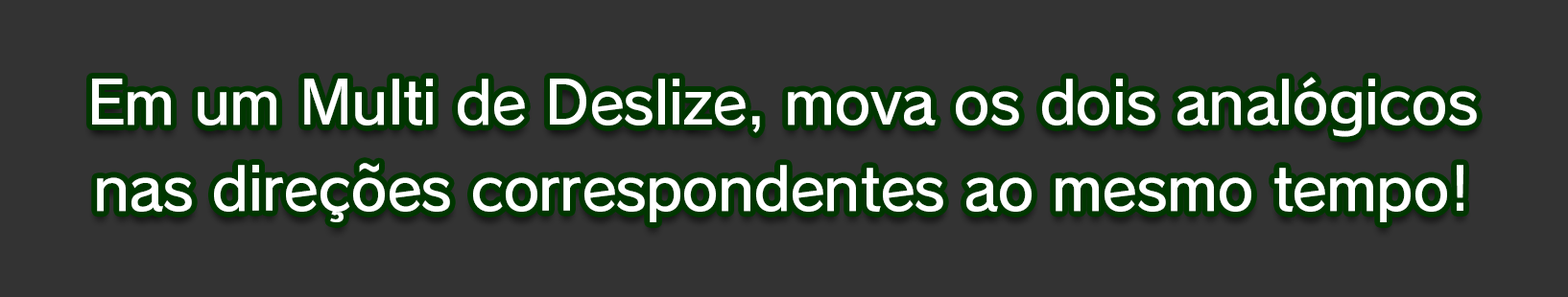
<style>
.page{position:relative;width:1568px;height:297px;background:#333333}
.page>*{position:absolute;margin:0}
.t1{font:58.9px/87px "RodinPro-DB";letter-spacing:-0.022em;color:#ffffff}
</style>
<div class="page">
<p class="t1" style="left:92px;top:77px;width:1385px;height:146px;text-align:center">Em um Multi de Deslize, mova os dois analógicos<br>nas direções correspondentes ao mesmo tempo!</p>
</div>
